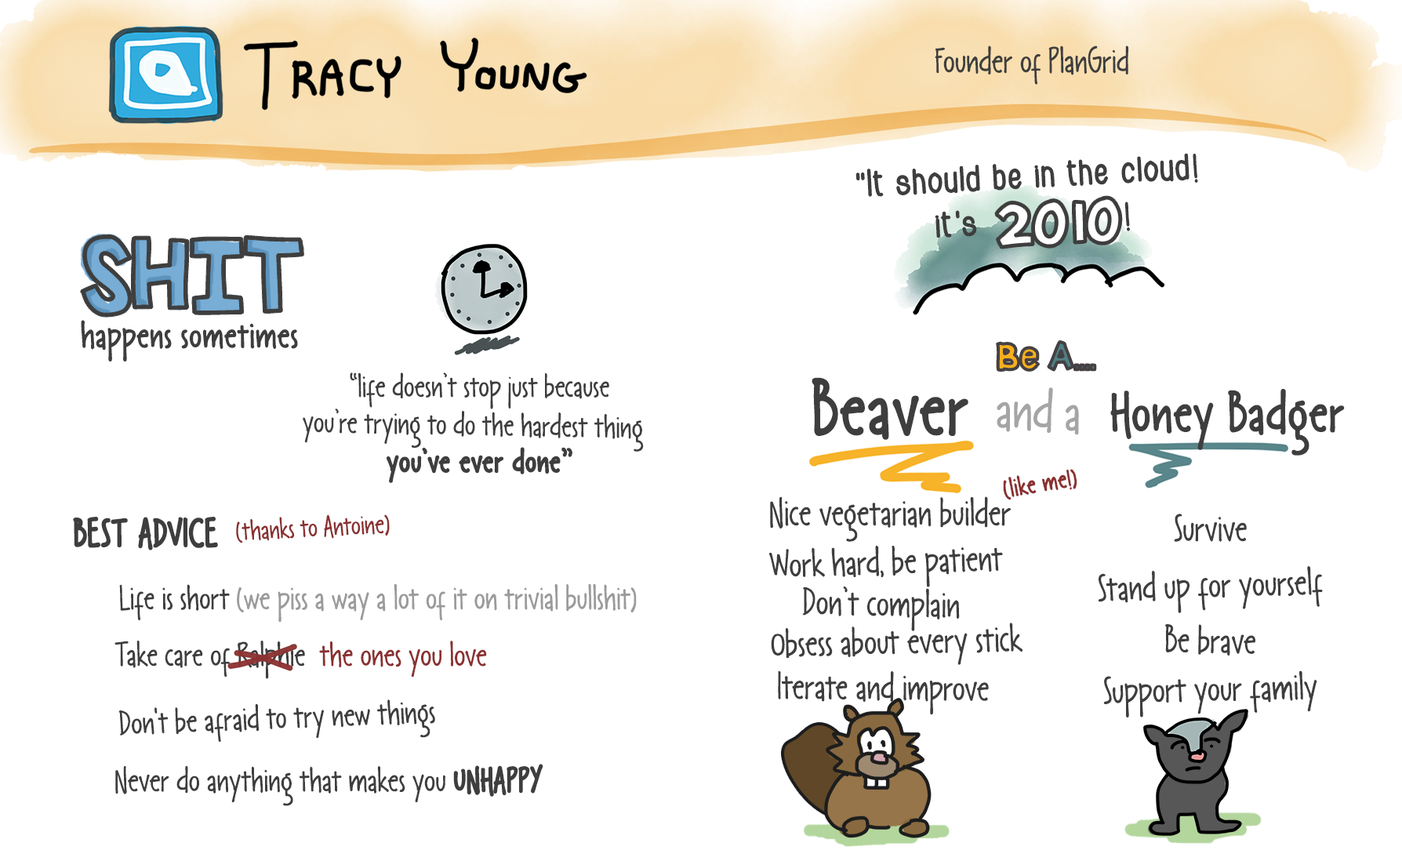
<style>
.page{position:relative;width:1402px;height:850px;background:#ffffff}
.page>*{position:absolute;margin:0}
.t1{font:34.8px "LangoPx-Regular";color:#3e3e3e}
.t2{font:37.1px "GrilledFontBold";color:#3e3e3e}
.t3{font:37.1px "LangoPx-Bold";color:#3e3e3e}
.t4{font:51.7px "KBSticktoIt";color:#3e3e3e}
.t5{font:85.2px "KBSticktoIt";color:#3e3e3e}
.t6{font:36.3px "LangoPx-Bold";color:#3e3e3e}
.t7{font:33.5px "KBSticktoIt";color:#494146}
.t8{font:31.3px "LangoPx-Regular";color:#3e3e3e}
.t9{font:31.3px "LangoPxFat-Regular";color:#3e3e3e}
.t10{font:76.4px "LangoPx-Bold";color:#3e3e3e}
.t11{font:55.2px "LangoPx-Regular";color:#a5a5a5}
.t12{font:55.2px "LangoPx-Bold";color:#3e3e3e}
.t13{font:26px "LangoPx-Bold";color:#8b3131}
.t14{font:37.1px "LangoPx-Regular";color:#3e3e3e}
.t15{font:37.1px "LangoPxFat-Regular";color:#3e3e3e}
.t16{font:27.7px "LangoPx-Regular";color:#8b3131}
.t17{font:33px "LangoPx-Regular";color:#9b9b9b}
.t18{font:33px "LangoPx-Regular";color:#3e3e3e}
.t19{font:33px "LangoPx-Regular";color:#8b3131}
.t20{font:33px "LangoPxFat-Regular";color:#3e3e3e}
</style>
<div class="page">
<p class="t1" style="left:935px;top:45px;width:194px;height:40px">Founder of PlanGrid</p>
<p class="t2" style="left:856px;top:153px;width:343px;height:85px;rotate:-3deg">“It should be in the cloud<span class="t3">!<br></span>       it’s             <span class="t3">!</span></p>
<p class="t4" style="left:995px;top:196px;width:127px;height:53px;rotate:-3deg">2010</p>
<p class="t5" style="left:81px;top:235px;width:223px;height:82px">SHIT</p>
<p class="t6" style="left:81px;top:320px;width:217px;height:42px">happens sometimes</p>
<p class="t7" style="left:997px;top:341px;width:100px;height:30px">Be A....</p>
<p class="t8" style="left:350px;top:373px;width:259px;height:110px;text-align:center">“life doesn’t stop just because<br><br><span class="t9">you’ve ever done”</span></p>
<p class="t10" style="left:812px;top:377px;width:157px;height:63px">Beaver</p>
<p class="t11" style="left:997px;top:387px;width:82px;height:48px;rotate:2deg">and a</p>
<p class="t12" style="left:1111px;top:389px;width:234px;height:67px">Honey Badger</p>
<p class="t8" style="left:303px;top:409px;width:341px;height:43px;rotate:1deg">you’re trying to do the hardest thing</p>
<p class="t13" style="left:1003px;top:469px;width:75px;height:31px;rotate:-10deg">(like me!)</p>
<p class="t14" style="left:770px;top:497px;width:241px;height:45px">Nice vegetarian builder</p>
<p class="t15" style="left:73px;top:517px;width:145px;height:34px">BEST ADVICE</p>
<p class="t16" style="left:236px;top:515px;width:154px;height:29px;rotate:-3deg">(thanks to Antoine)</p>
<p class="t14" style="left:1174px;top:514px;width:73px;height:28px">Survive</p>
<p class="t14" style="left:769px;top:545px;width:234px;height:42px;rotate:-2deg">Work hard, be patient</p>
<p class="t14" style="left:1099px;top:566px;width:224px;height:47px;rotate:-2deg">Stand up for yourself</p>
<p class="t17" style="left:119px;top:584px;width:518px;height:39px"><span class="t18">Life is short</span> (we piss a way a lot of it on trivial bullshit)</p>
<p class="t14" style="left:802px;top:587px;width:158px;height:44px;rotate:1deg">Don’t complain</p>
<p class="t14" style="left:771px;top:623px;width:253px;height:42px;rotate:-1deg">Obsess about every stick</p>
<p class="t14" style="left:1166px;top:624px;width:90px;height:32px;rotate:1deg">Be brave</p>
<p class="t18" style="left:115px;top:640px;width:372px;height:39px">Take care of Ralphie  <span class="t19">the ones you love</span></p>
<p class="t14" style="left:778px;top:671px;width:211px;height:44px;rotate:1deg">Iterate and improve</p>
<p class="t14" style="left:1104px;top:671px;width:214px;height:47px;rotate:-1deg">Support your family</p>
<p class="t18" style="left:118px;top:700px;width:317px;height:43px;rotate:-2deg">Don't be afraid to try new things</p>
<p class="t18" style="left:115px;top:764px;width:429px;height:42px">Never do anything that makes you <span class="t20">UNHAPPY</span></p>
</div>
